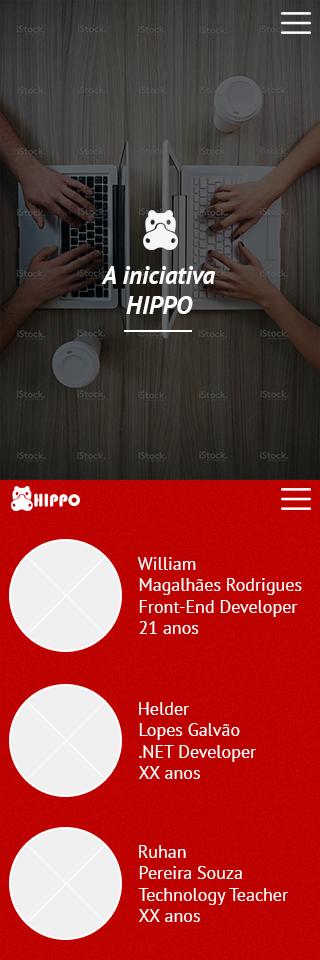
<style>
.page{position:relative;width:320px;height:960px}
.page>*{position:absolute;margin:0}
.t1{font:25px "PTSans-BoldItalic";color:#ffffff}
.t2{font:18px "PTSans-Regular";color:#ffffff}
</style>
<div class="page">
<p class="t1" style="left:101px;top:266px;width:115px;height:48px;text-align:center">A iniciativa<br>HIPPO</p>
<p class="t2" style="left:137px;top:557px;width:165px;height:77px">William<br>Magalhães Rodrigues<br>Front-End Developer<br>21 anos</p>
<p class="t2" style="left:139px;top:702px;width:117px;height:77px">Helder<br>Lopes Galvão<br>.NET Developer<br>XX anos</p>
<p class="t2" style="left:138px;top:845px;width:150px;height:77px">Ruhan<br>Pereira Souza<br>Technology Teacher<br>XX anos</p>
</div>
